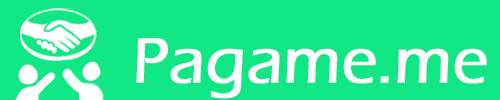
<style>
.page{position:relative;width:500px;height:100px;background:#11e684}
.page>*{position:absolute;margin:0}
.t1{font:65.4px "ErasITC-Medium";color:#ffffff;font-weight:bold}
</style>
<div class="page">
<p class="t1" style="left:136px;top:38px;width:351px;height:61px">Pagame.me</p>
</div>
